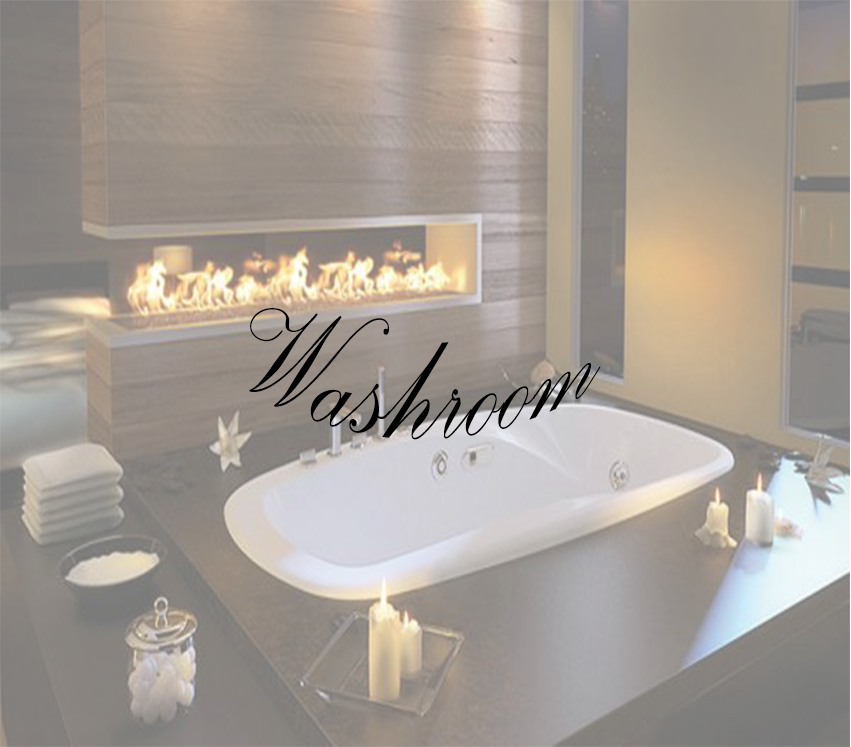
<style>
.page{position:relative;width:851px;height:747px}
.page>*{position:absolute;margin:0}
.t1{font:150px "PalaceScriptMT";color:#000000}
</style>
<div class="page">
<p class="t1" style="left:249px;top:308px;width:352px;height:132px">Washroom</p>
</div>
